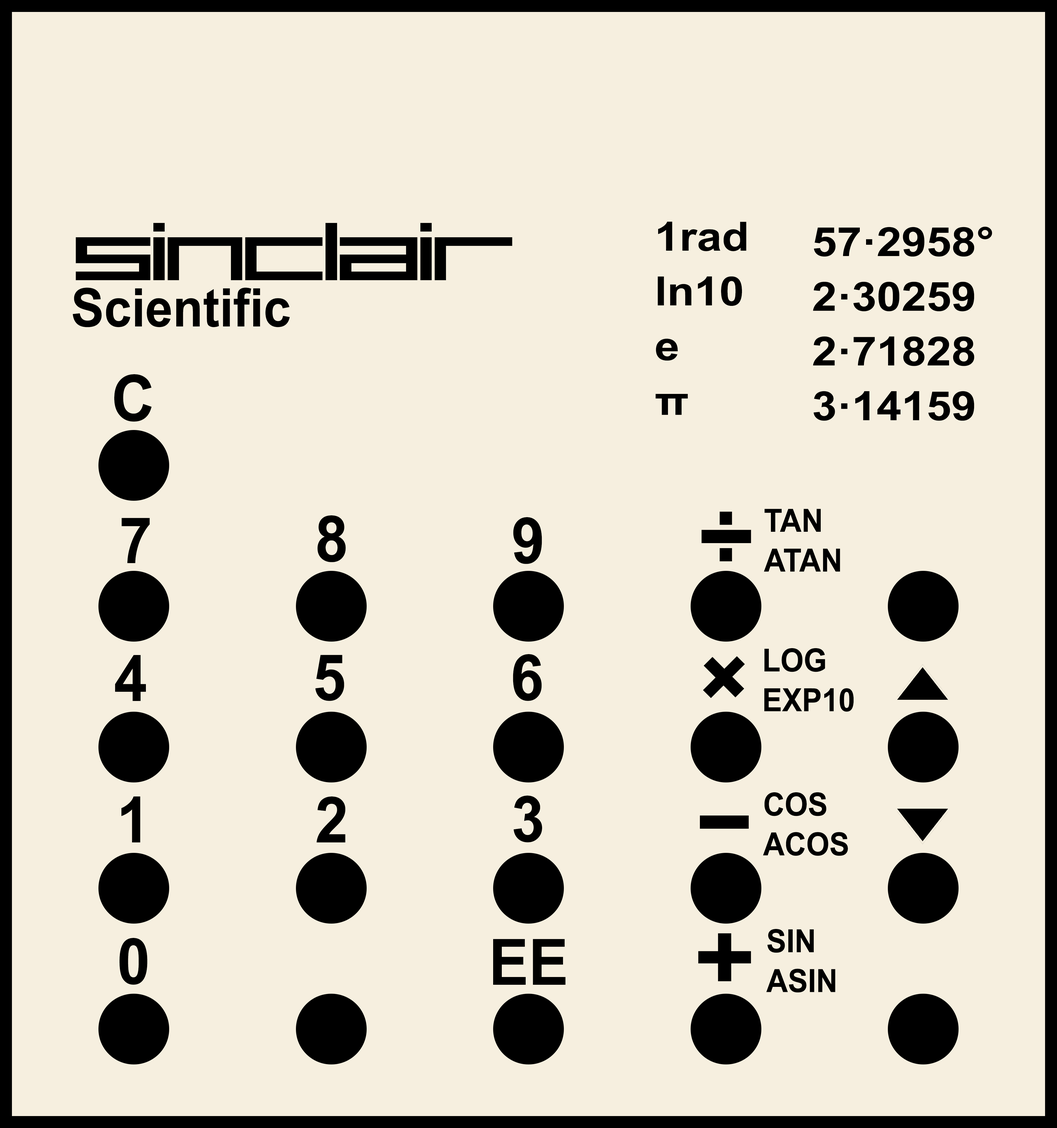
<style>
.page{position:relative;width:1057px;height:1128px;background:#f6efdf}
.page>*{position:absolute;margin:0}
.t1{font:40.3px/54.7px "Arial-BoldMT";color:#010101;scale:1.11 1}
.t2{font:40.3px/54.7px "Arial-BoldMT";color:#000000;scale:1.11 1}
.t3{font:53.2px "Arial-BoldMT";color:#000000;scale:0.93 1}
.t4{font:63.9px "Arial-BoldMT";color:#000000;scale:0.93 1}
.t5{font:31.9px/39.8px "Arial-BoldMT";color:#000000;scale:0.93 1}
.t6{font:95.8px "Arial-BoldMT";color:#000000;scale:0.93 1}
.t7{font:95.8px "Arial-BoldMT";color:#000000;scale:1.91 1}
.t8{font:95.7px "Arial-BoldMT";color:#000000;scale:1.89 1}
.t9{font:95.7px "Arial-BoldMT";color:#000000;scale:1.1 1}
</style>
<div class="page">
<p class="t1" style="left:656px;top:221px;width:91px;height:194px">1rad<br>ln10<br>e<br>π</p>
<p class="t2" style="left:813px;top:226px;width:179px;height:195px">57·2958°<br>2·30259<br>2·71828<br>3·14159</p>
<p class="t3" style="left:73px;top:288px;width:217px;height:39px">Scientific</p>
<p class="t4" style="left:114px;top:374px;width:38px;height:48px">C</p>
<p class="t5" style="left:764px;top:509px;width:76px;height:63px">TAN<br>ATAN</p>
<p class="t4" style="left:121px;top:518px;width:29px;height:45px">7</p>
<p class="t4" style="left:317px;top:515px;width:29px;height:47px">8</p>
<p class="t4" style="left:513px;top:517px;width:29px;height:47px">9</p>
<p class="t6" style="left:720px;top:511px;width:12px;height:50px">:</p>
<p class="t7" style="left:702px;top:530px;width:49px;height:13px">-</p>
<p class="t5" style="left:764px;top:648px;width:90px;height:64px">LOG<br>EXP10</p>
<p class="t4" style="left:115px;top:655px;width:31px;height:46px">4</p>
<p class="t4" style="left:315px;top:655px;width:29px;height:46px">5</p>
<p class="t4" style="left:513px;top:654px;width:29px;height:47px">6</p>
<p class="t6" style="left:703px;top:656px;width:42px;height:42px;rotate:45deg">+</p>
<p class="t4" style="left:121px;top:796px;width:19px;height:46px">1</p>
<p class="t4" style="left:317px;top:796px;width:29px;height:46px">2</p>
<p class="t4" style="left:514px;top:796px;width:28px;height:46px">3</p>
<p class="t5" style="left:763px;top:792px;width:85px;height:64px">COS<br>ACOS</p>
<p class="t8" style="left:700px;top:815px;width:49px;height:14px">-</p>
<p class="t5" style="left:766px;top:929px;width:69px;height:63px">SIN<br>ASIN</p>
<p class="t4" style="left:119px;top:938px;width:28px;height:47px">0</p>
<p class="t4" style="left:493px;top:939px;width:73px;height:46px">EE</p>
<p class="t9" style="left:698px;top:933px;width:53px;height:48px">+</p>
</div>
